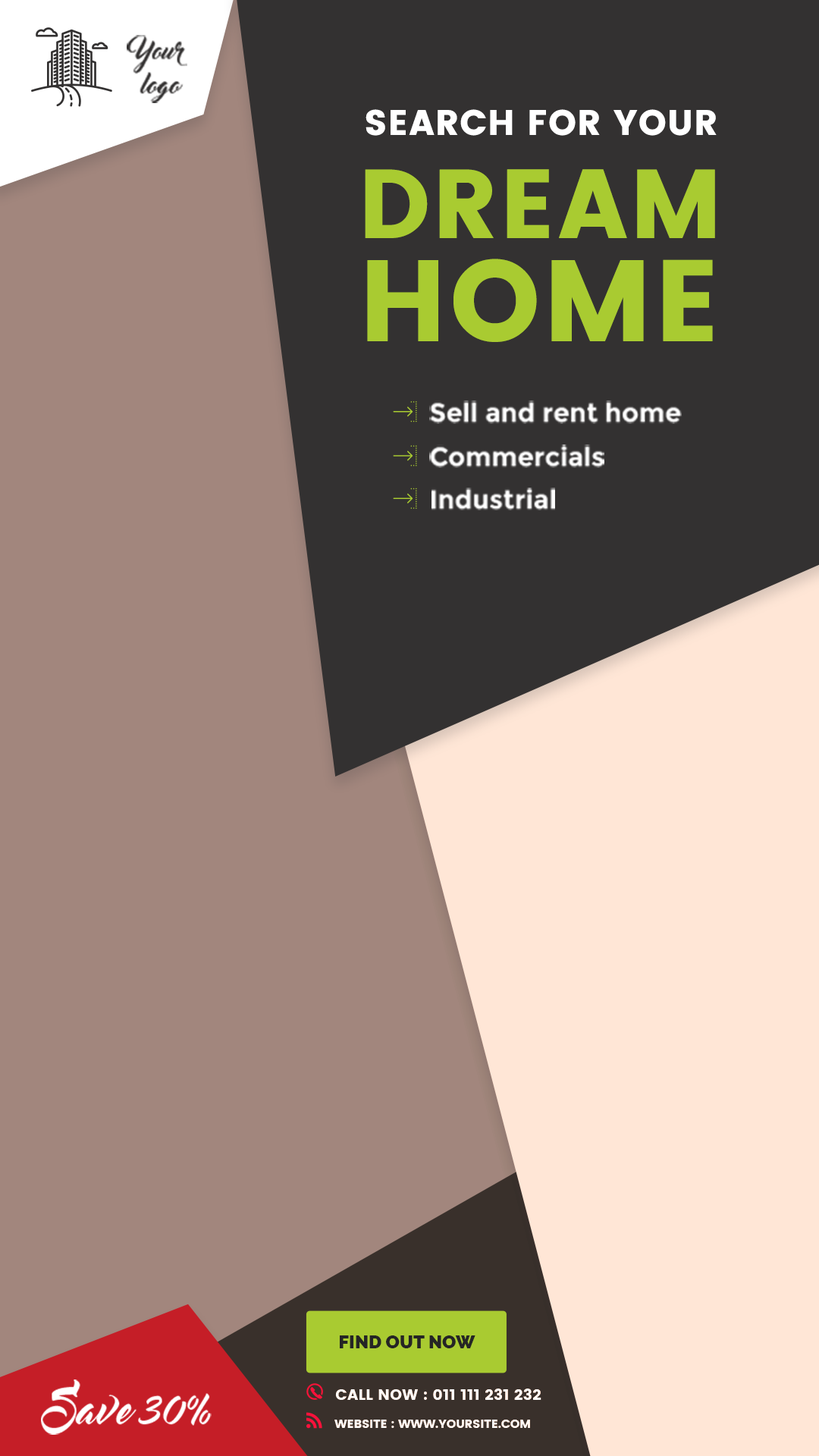
<style>
.page{position:relative;width:819px;height:1456px;background:#a2867d}
.page>*{position:absolute;margin:0}
.t1{font:24.1px/34.4px "MasterOfBreak";color:#333131}
.t2{font:35.3px/103px "Poppins";color:#ffffff;text-transform:uppercase;font-weight:bold}
.t3{font:97.1px/103px "Poppins";color:#a9cb31;text-transform:uppercase;font-weight:bold}
.t4{font:114.8px/103px "Poppins";color:#a9cb31;text-transform:uppercase;font-weight:bold}
.t5{font:26.5px "Montserrat-Bold";color:#ffffff}
.t6{font:18.2px "Raleway-Black";color:#252525;text-transform:uppercase}
.t7{font:40.9px "MasterOfBreak";color:#ffffff}
.t8{font:15.5px "Poppins";color:#ffffff;text-transform:uppercase}
.t9{font:11.8px "Poppins";color:#ffffff;text-transform:uppercase}
</style>
<div class="page">
<p class="t1" style="left:127px;top:35px;width:60px;height:68px;text-align:center">Your<br>logo</p>
<p class="t2" style="left:365px;top:109px;width:352px;height:233px;text-align:center">search for your<br><span class="t3">dream<br></span><span class="t4">home</span></p>
<p class="t5" style="left:429px;top:400px;width:253px;height:24px">Sell and rent home</p>
<p class="t5" style="left:429px;top:444px;width:175px;height:24px">Commercials</p>
<p class="t5" style="left:431px;top:488px;width:124px;height:22px">Industrial</p>
<p class="t6" style="left:340px;top:1335px;width:135px;height:13px">find out now</p>
<p class="t7" style="left:41px;top:1379px;width:171px;height:56px">Save 30%</p>
<p class="t8" style="left:335px;top:1388px;width:206px;height:12px">call now : 011 111 231 232</p>
<p class="t9" style="left:334px;top:1420px;width:196px;height:8px">website : www.yoursite.com</p>
</div>
